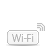
<style>
.page{position:relative;width:48px;height:48px;background:#ffffff}
.page>*{position:absolute;margin:0}
.t1{font:11px "MyriadPro-Light";color:#b2b2b2}
</style>
<div class="page">
<p class="t1" style="left:12px;top:34px;width:22px;height:8px">Wi-Fi</p>
</div>
